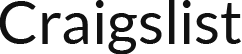
<style>
.page{position:relative;width:242px;height:54px;background:#ffffff}
.page>*{position:absolute;margin:0}
.t1{font:60px "Lato-Regular";color:#111111}
</style>
<div class="page">
<p class="t1" style="left:0px;top:0px;width:241px;height:55px">Craigslist</p>
</div>
